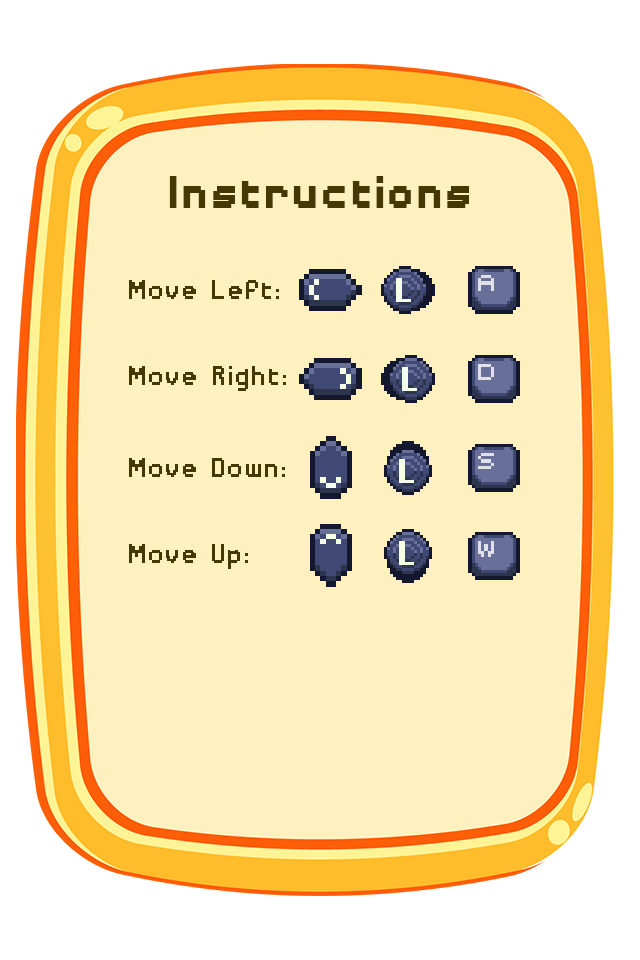
<style>
.page{position:relative;width:640px;height:960px;background:#fff0bf}
.page>*{position:absolute;margin:0}
.t1{font:60px "DisposableDroidBB-Bold";color:#453802}
.t2{font:36px "DisposableDroidBB-Bold";color:#453802}
</style>
<div class="page">
<p class="t1" style="left:169px;top:176px;width:300px;height:32px">Instructions</p>
<p class="t2" style="left:129px;top:280px;width:150px;height:19px">Move Left:</p>
<p class="t2" style="left:129px;top:366px;width:157px;height:25px">Move Right:</p>
<p class="t2" style="left:129px;top:458px;width:156px;height:19px">Move Down:</p>
<p class="t2" style="left:129px;top:544px;width:119px;height:25px">Move Up:</p>
</div>
